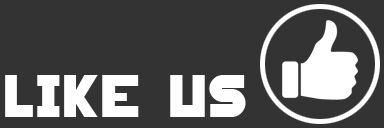
<style>
.page{position:relative;width:384px;height:128px;background:#333333}
.page>*{position:absolute;margin:0}
.t1{font:56px "HungerGames";color:#ffffff}
</style>
<div class="page">
<p class="t1" style="left:5px;top:75px;width:241px;height:42px">LIKE US</p>
</div>
